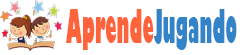
<style>
.page{position:relative;width:240px;height:55px;background:#ffffff}
.page>*{position:absolute;margin:0}
.t1{font:44.8px "GillSans-UltraBold";color:#ff633c;scale:0.36 1}
.t2{font:44.8px "GillSans-UltraBold";color:#3283c8;scale:0.36 1}
</style>
<div class="page">
<p class="t1" style="left:66px;top:9px;width:171px;height:41px">Aprende<span class="t2">Jugando</span></p>
</div>
